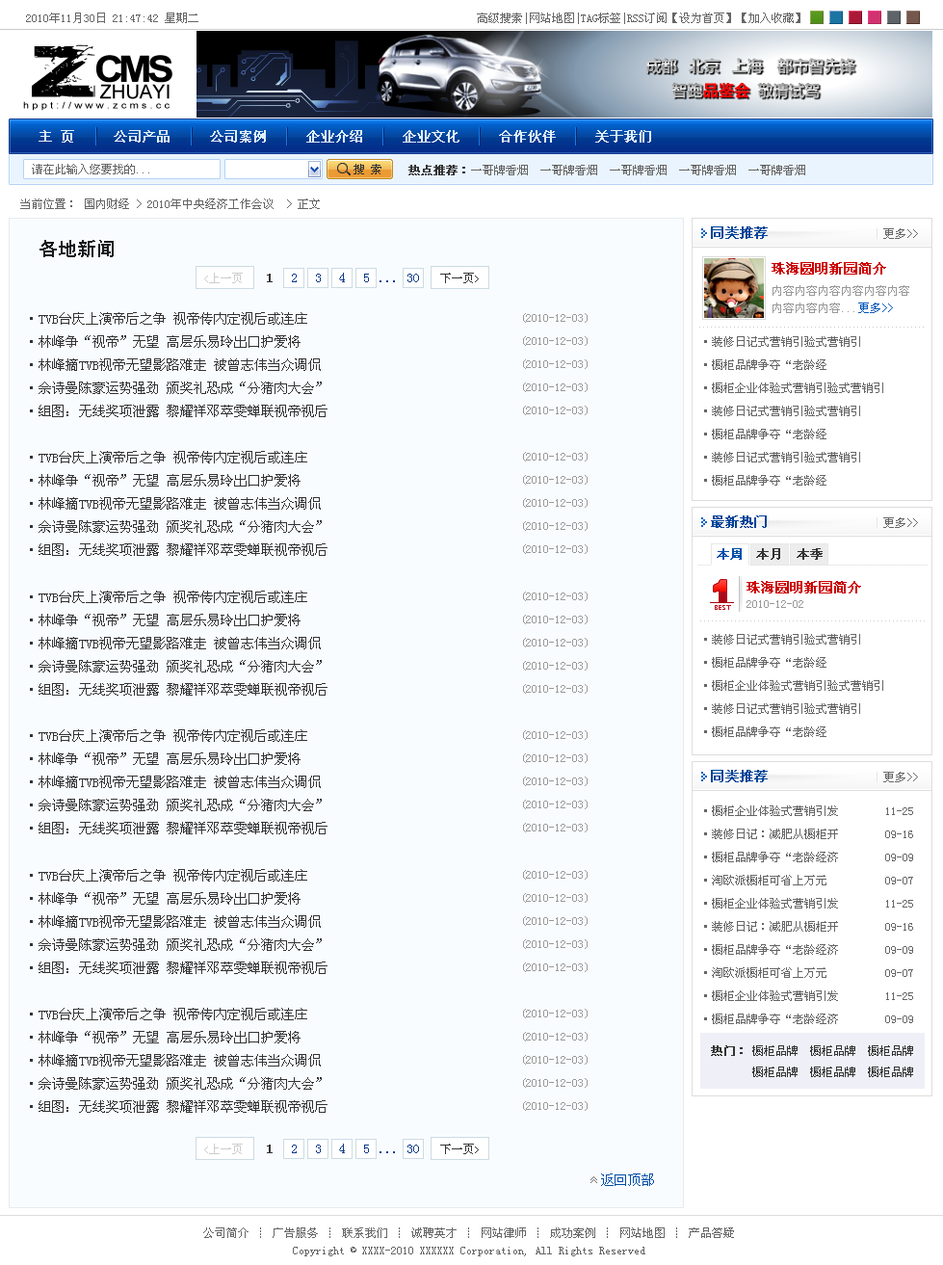
<style>
.page{position:relative;width:943px;height:1265px;background:#f9fcff}
.page>*{position:absolute;margin:0}
.t1{font:11.6px "SimSun";color:#666666}
.t2{font:13.5px "SimSun";color:#deeff9;font-weight:bold}
.t3{font:11.6px "SimSun";color:#333333}
.t4{font:11.6px "SimSun";color:#333333;font-weight:bold}
.t5{font:13.5px "SimSun";color:#004499;font-weight:bold}
.t6{font:19.3px "SimHei";color:#1a1a1a}
.t7{font:13.5px "SimSun";color:#cc0000;font-weight:bold}
.t8{font:11.6px "SimSun";color:#cccccc}
.t9{font:9.6px "SimSun";color:#cccccc}
.t10{font:13.5px "SimSun";color:#333333;font-weight:bold}
.t11{font:13.5px "SimSun";color:#0b3b8c}
.t12{font:9.6px "SimSun";color:#333333}
.t13{font:11.6px/17.3px "SimSun";color:#999999}
.t14{font:11.6px/17.3px "SimSun";color:#0356b9}
.t15{font:13.5px/23.1px "SimSun";color:#333333}
.t16{font:11.6px/23.1px "SimSun";color:#999999}
.t17{font:11.6px/23.1px "SimSun";color:#666666}
.t18{font:12.5px "SimSun";color:#014da8;font-weight:bold}
.t19{font:12.5px "SimSun";color:#333333;font-weight:bold}
.t20{font:28.9px "Arial-Black";font-weight:bold}
.t21{font:6.7px "LucidaSansUnicode";letter-spacing:0.06em;color:#bf0a1d}
.t22{font:11.6px "SimSun";color:#999999}
.t23{font:13.5px "SimSun";color:#014da8}
.t24{font:11.6px/17.3px "SimSun";color:#666666}
</style>
<div class="page">
<p class="t1" style="left:26px;top:13px;width:774px;height:11px">2010年11月30日 21:47:42 星期二                                                高级搜索|网站地图|TAG标签|RSS订阅【设为首页】【加入收藏】</p>
<p class="t2" style="left:39px;top:130px;width:612px;height:13px">主 页     公司产品     公司案例     企业介绍     企业文化     合作伙伴     关于我们</p>
<p class="t1" style="left:32px;top:164px;width:117px;height:10px">请在此输入您要找的...</p>
<p class="t3" style="left:353px;top:164px;width:28px;height:10px">搜 索</p>
<p class="t1" style="left:408px;top:165px;width:397px;height:10px"><span class="t4">热点推荐：</span>一哥牌香烟  一哥牌香烟  一哥牌香烟  一哥牌香烟  一哥牌香烟</p>
<p class="t1" style="left:20px;top:198px;width:300px;height:11px">当前位置： 国内财经 &gt; 2010年中央经济工作会议  &gt; 正文</p>
<p class="t5" style="left:711px;top:226px;width:57px;height:13px">同类推荐</p>
<p class="t1" style="left:883px;top:228px;width:35px;height:11px">更多&gt;&gt;</p>
<p class="t6" style="left:39px;top:240px;width:75px;height:17px">各地新闻</p>
<p class="t7" style="left:771px;top:262px;width:115px;height:12px">珠海圆明新园简介</p>
<p class="t8" style="left:204px;top:273px;width:39px;height:10px"><span class="t9">&lt;</span>上一页</p>
<p class="t10" style="left:267px;top:274px;width:6px;height:8px">1</p>
<p class="t11" style="left:292px;top:274px;width:5px;height:8px">2</p>
<p class="t11" style="left:316px;top:274px;width:5px;height:8px">3</p>
<p class="t11" style="left:339px;top:273px;width:6px;height:9px">4</p>
<p class="t11" style="left:364px;top:274px;width:5px;height:8px">5</p>
<p class="t11" style="left:379px;top:280px;width:16px;height:2px">...</p>
<p class="t11" style="left:407px;top:274px;width:12px;height:8px">30</p>
<p class="t3" style="left:440px;top:273px;width:39px;height:10px">下一页<span class="t12">&gt;</span></p>
<p class="t13" style="left:772px;top:285px;width:137px;height:28px">内容内容内容内容内容内容<br>内容内容内容...<span class="t14">更多&gt;&gt;</span></p>
<p class="t15" style="left:30px;top:312px;width:297px;height:105px">·TVB台庆上演帝后之争 视帝传内定视后或连庄<br>·林峰争“视帝”无望 高层乐易玲出口护爱将<br>·林峰摘TVB视帝无望影路难走 被曾志伟当众调侃<br>·佘诗曼陈豪运势强劲 颁奖礼恐成“分猪肉大会”<br>·组图：无线奖项泄露 黎耀祥邓萃雯蝉联视帝视后</p>
<p class="t16" style="left:523px;top:313px;width:65px;height:102px">(2010-12-03)<br>(2010-12-03)<br>(2010-12-03)<br>(2010-12-03)<br>(2010-12-03)</p>
<p class="t17" style="left:704px;top:336px;width:179px;height:149px">·装修日记式营销引验式营销引<br>·橱柜品牌争夺“老龄经 <br>·橱柜企业体验式营销引验式营销引<br>·装修日记式营销引验式营销引<br>·橱柜品牌争夺“老龄经  <br>·装修日记式营销引验式营销引<br>·橱柜品牌争夺“老龄经</p>
<p class="t15" style="left:30px;top:451px;width:297px;height:105px">·TVB台庆上演帝后之争 视帝传内定视后或连庄<br>·林峰争“视帝”无望 高层乐易玲出口护爱将<br>·林峰摘TVB视帝无望影路难走 被曾志伟当众调侃<br>·佘诗曼陈豪运势强劲 颁奖礼恐成“分猪肉大会”<br>·组图：无线奖项泄露 黎耀祥邓萃雯蝉联视帝视后</p>
<p class="t16" style="left:523px;top:452px;width:65px;height:102px">(2010-12-03)<br>(2010-12-03)<br>(2010-12-03)<br>(2010-12-03)<br>(2010-12-03)</p>
<p class="t5" style="left:711px;top:515px;width:56px;height:13px">最新热门</p>
<p class="t1" style="left:883px;top:517px;width:35px;height:11px">更多&gt;&gt;</p>
<p class="t18" style="left:717px;top:548px;width:25px;height:12px">本周</p>
<p class="t19" style="left:756px;top:548px;width:24px;height:12px">本月</p>
<p class="t19" style="left:797px;top:548px;width:26px;height:12px">本季</p>
<p class="t20" style="left:714px;top:580px;width:12px;height:22px">1</p>
<p class="t7" style="left:746px;top:581px;width:115px;height:12px">珠海圆明新园简介</p>
<p class="t15" style="left:30px;top:590px;width:297px;height:105px">·TVB台庆上演帝后之争 视帝传内定视后或连庄<br>·林峰争“视帝”无望 高层乐易玲出口护爱将<br>·林峰摘TVB视帝无望影路难走 被曾志伟当众调侃<br>·佘诗曼陈豪运势强劲 颁奖礼恐成“分猪肉大会”<br>·组图：无线奖项泄露 黎耀祥邓萃雯蝉联视帝视后</p>
<p class="t16" style="left:523px;top:591px;width:65px;height:102px">(2010-12-03)<br>(2010-12-03)<br>(2010-12-03)<br>(2010-12-03)<br>(2010-12-03)</p>
<p class="t21" style="left:715px;top:605px;width:16px;height:5px">BEST</p>
<p class="t22" style="left:746px;top:600px;width:57px;height:8px">2010-12-02</p>
<p class="t17" style="left:704px;top:634px;width:179px;height:103px">·装修日记式营销引验式营销引<br>·橱柜品牌争夺“老龄经 <br>·橱柜企业体验式营销引验式营销引<br>·装修日记式营销引验式营销引<br>·橱柜品牌争夺“老龄经</p>
<p class="t15" style="left:30px;top:729px;width:297px;height:105px">·TVB台庆上演帝后之争 视帝传内定视后或连庄<br>·林峰争“视帝”无望 高层乐易玲出口护爱将<br>·林峰摘TVB视帝无望影路难走 被曾志伟当众调侃<br>·佘诗曼陈豪运势强劲 颁奖礼恐成“分猪肉大会”<br>·组图：无线奖项泄露 黎耀祥邓萃雯蝉联视帝视后</p>
<p class="t16" style="left:523px;top:730px;width:65px;height:102px">(2010-12-03)<br>(2010-12-03)<br>(2010-12-03)<br>(2010-12-03)<br>(2010-12-03)</p>
<p class="t5" style="left:711px;top:770px;width:57px;height:12px">同类推荐</p>
<p class="t1" style="left:883px;top:771px;width:35px;height:11px">更多&gt;&gt;</p>
<p class="t17" style="left:704px;top:805px;width:209px;height:219px">·橱柜企业体验式营销引发        11-25<br>·装修日记：减肥从橱柜开        09-16    <br>·橱柜品牌争夺“老龄经济        09-09    <br>·淘欧派橱柜可省上万元          09-07   <br>·橱柜企业体验式营销引发        11-25<br>·装修日记：减肥从橱柜开        09-16<br>·橱柜品牌争夺“老龄经济        09-09<br>·淘欧派橱柜可省上万元          09-07   <br>·橱柜企业体验式营销引发        11-25 <br>·橱柜品牌争夺“老龄经济        09-09</p>
<p class="t15" style="left:30px;top:869px;width:297px;height:105px">·TVB台庆上演帝后之争 视帝传内定视后或连庄<br>·林峰争“视帝”无望 高层乐易玲出口护爱将<br>·林峰摘TVB视帝无望影路难走 被曾志伟当众调侃<br>·佘诗曼陈豪运势强劲 颁奖礼恐成“分猪肉大会”<br>·组图：无线奖项泄露 黎耀祥邓萃雯蝉联视帝视后</p>
<p class="t16" style="left:523px;top:870px;width:65px;height:102px">(2010-12-03)<br>(2010-12-03)<br>(2010-12-03)<br>(2010-12-03)<br>(2010-12-03)</p>
<p class="t15" style="left:30px;top:1007px;width:297px;height:105px">·TVB台庆上演帝后之争 视帝传内定视后或连庄<br>·林峰争“视帝”无望 高层乐易玲出口护爱将<br>·林峰摘TVB视帝无望影路难走 被曾志伟当众调侃<br>·佘诗曼陈豪运势强劲 颁奖礼恐成“分猪肉大会”<br>·组图：无线奖项泄露 黎耀祥邓萃雯蝉联视帝视后</p>
<p class="t16" style="left:523px;top:1008px;width:65px;height:103px">(2010-12-03)<br>(2010-12-03)<br>(2010-12-03)<br>(2010-12-03)<br>(2010-12-03)</p>
<p class="t4" style="left:711px;top:1045px;width:32px;height:11px">热门：</p>
<p class="t3" style="left:752px;top:1045px;width:161px;height:11px">橱柜品牌  橱柜品牌  橱柜品牌</p>
<p class="t3" style="left:752px;top:1066px;width:161px;height:11px">橱柜品牌  橱柜品牌  橱柜品牌</p>
<p class="t8" style="left:204px;top:1143px;width:39px;height:11px"><span class="t9">&lt;</span>上一页</p>
<p class="t10" style="left:267px;top:1144px;width:6px;height:9px">1</p>
<p class="t11" style="left:292px;top:1144px;width:5px;height:9px">2</p>
<p class="t11" style="left:316px;top:1144px;width:5px;height:9px">3</p>
<p class="t11" style="left:339px;top:1143px;width:6px;height:10px">4</p>
<p class="t11" style="left:364px;top:1144px;width:5px;height:9px">5</p>
<p class="t11" style="left:407px;top:1144px;width:12px;height:9px">30</p>
<p class="t3" style="left:440px;top:1143px;width:39px;height:11px">下一页<span class="t12">&gt;</span></p>
<p class="t11" style="left:379px;top:1151px;width:16px;height:2px">...</p>
<p class="t23" style="left:601px;top:1173px;width:53px;height:13px">返回顶部</p>
<p class="t24" style="left:203px;top:1227px;width:531px;height:29px;text-align:center">公司简介 ┊ 广告服务 ┊ 联系我们 ┊ 诚聘英才 ┊ 网站律师 ┊ 成功案例 ┊ 网站地图 ┊ 产品答疑<br>Copyright © XXXX-2010 XXXXXX Corporation, All Rights Reserved</p>
</div>
